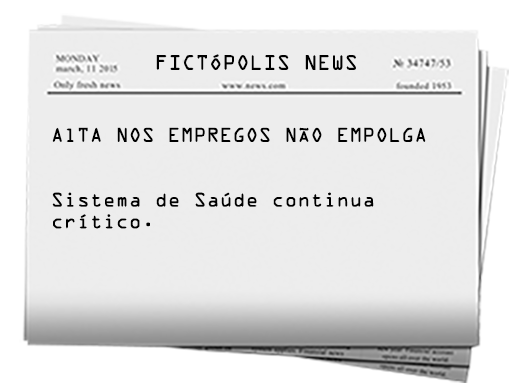
<style>
.page{position:relative;width:512px;height:387px;background:#ededed}
.page>*{position:absolute;margin:0}
.t1{font:18.8px "OCRAStd";color:#000000}
.t2{font:18px "OCRAStd";color:#000000}
</style>
<div class="page">
<p class="t1" style="left:156px;top:54px;width:200px;height:16px">FICTÓPOLIS NEWS</p>
<p class="t2" style="left:52px;top:127px;width:374px;height:102px">AlTA NOS EMPREGOS NÃO EMPOLGA<br><br><br>Sistema de Saúde continua <br>crítico.</p>
</div>
